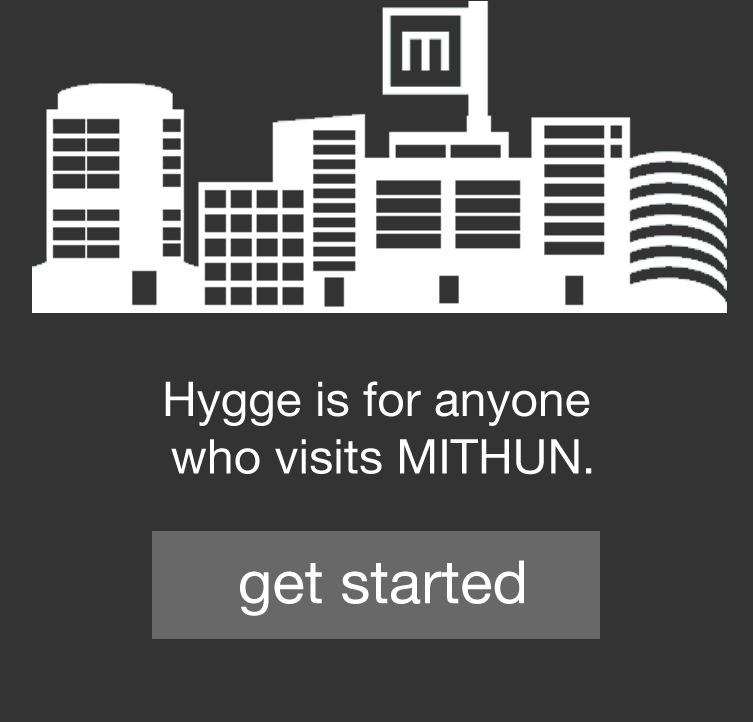
<style>
.page{position:relative;width:753px;height:722px;background:#333333}
.page>*{position:absolute;margin:0}
.t1{font:48px "HelveticaNeue";color:#ffffff}
.t2{font:60px "HelveticaNeue";color:#ffffff}
</style>
<div class="page">
<p class="t1" style="left:165px;top:381px;width:427px;height:235px;text-align:center">Hygge is for anyone <br>who visits MITHUN.<br><br><span class="t2">get started</span></p>
</div>
